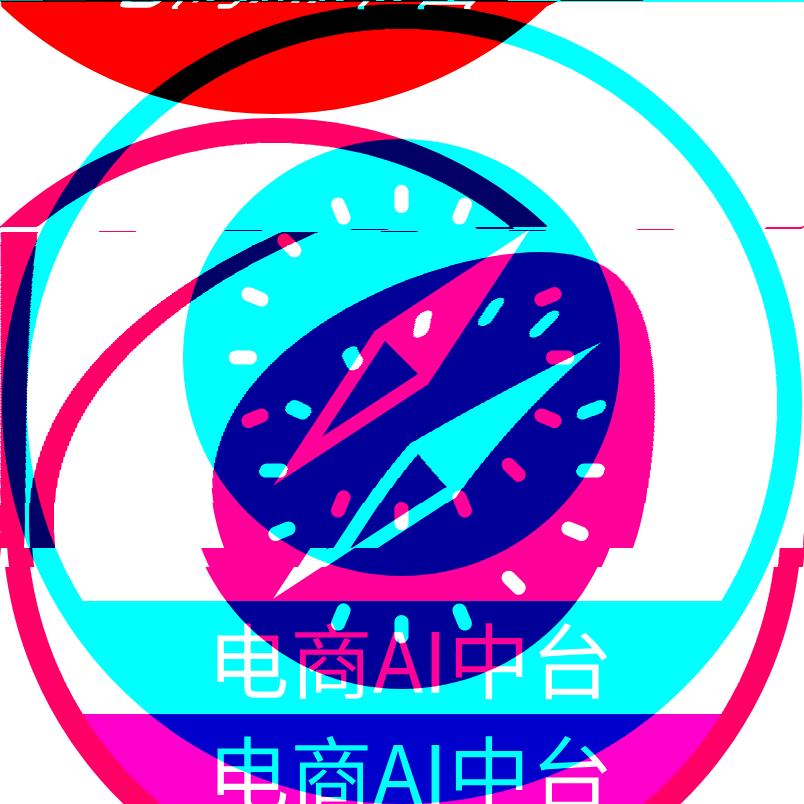
<style>
.page{position:relative;width:804px;height:804px;background:#ffffff}
.page>*{position:absolute;margin:0}
.t1{font:83.1px "MicrosoftYaHei"}
</style>
<div class="page">
<p class="t1" style="left:217px;top:621px;width:391px;height:77px">电商AI中台</p>
</div>
